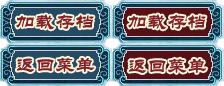
<style>
.page{position:relative;width:224px;height:86px}
.page>*{position:absolute;margin:0}
.t1{font:20px "STLiti";color:#821f2a}
</style>
<div class="page">
<p class="t1" style="left:16px;top:14px;width:78px;height:16px">加载存档</p>
<p class="t1" style="left:128px;top:14px;width:78px;height:16px">加载存档</p>
<p class="t1" style="left:16px;top:57px;width:79px;height:15px">返回菜单</p>
<p class="t1" style="left:128px;top:58px;width:79px;height:15px">返回菜单</p>
</div>
